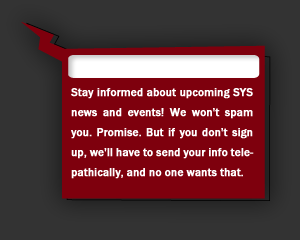
<style>
.page{position:relative;width:300px;height:240px;background:#333333}
.page>*{position:absolute;margin:0}
.t1{font:11.7px/20px "FranklinGothic-Medium";color:#ffffff;font-weight:bold;scale:0.96 1}
</style>
<div class="page">
<p class="t1" style="left:71px;top:88px;width:183px;height:91px;text-align:justify">Stay informed about upcoming SYS news and events! We won't spam you. Promise. But if you don't sign up, we'll have to send your info telepathically, and no one wants that.</p>
</div>
